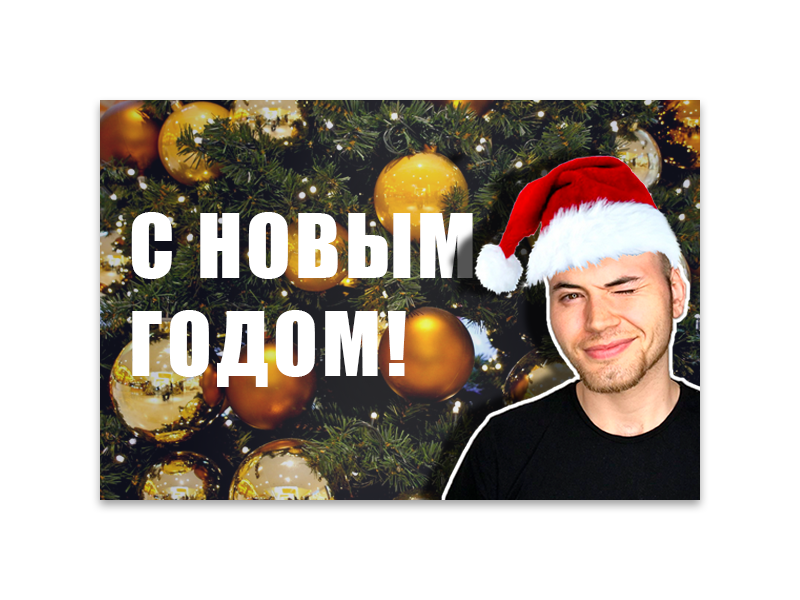
<style>
.page{position:relative;width:800px;height:600px;background:#ffffff}
.page>*{position:absolute;margin:0}
.t1{font:82px "Impact";letter-spacing:0.05em;color:#ffffff}
</style>
<div class="page">
<p class="t1" style="left:131px;top:212px;width:342px;height:175px">С НОВЫМ<br>ГОДОМ!</p>
</div>
